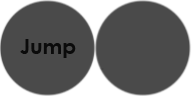
<style>
.page{position:relative;width:192px;height:96px;background:#4a4a4a}
.page>*{position:absolute;margin:0}
.t1{font:20.8px "CenturyGothic-Bold";color:#0b0b0b}
</style>
<div class="page">
<p class="t1" style="left:20px;top:39px;width:56px;height:19px">Jump</p>
</div>
